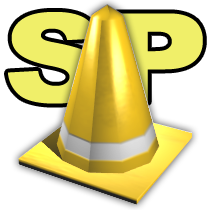
<style>
.page{position:relative;width:210px;height:210px;background:#ffffff}
.page>*{position:absolute;margin:0}
.t1{font:123.7px "Arial-Black";color:#f0ef69;scale:1.15 1}
</style>
<div class="page">
<p class="t1" style="left:8px;top:12px;width:195px;height:92px">SP</p>
</div>
